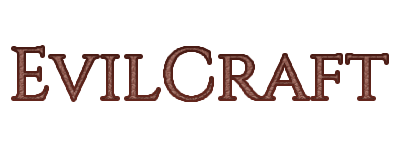
<style>
.page{position:relative;width:400px;height:150px;background:#ffffff}
.page>*{position:absolute;margin:0}
.t1{font:72px "Cinzel-Regular"}
</style>
<div class="page">
<p class="t1" style="left:13px;top:47px;width:374px;height:53px">EvilCraft</p>
</div>
